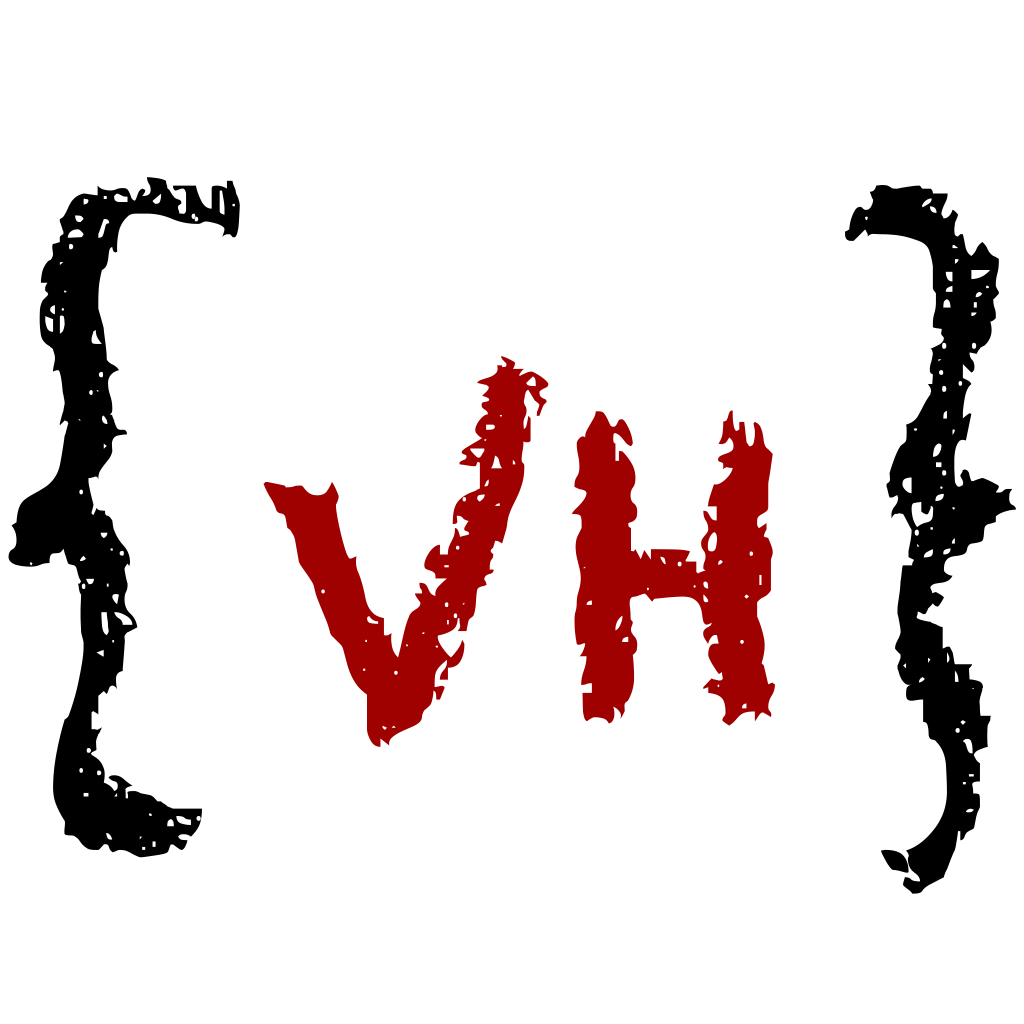
<style>
.page{position:relative;width:1024px;height:1024px;background:#ffffff}
.page>*{position:absolute;margin:0}
.t1{font:400px "Chalkduster";color:#9f0000}
.t2{font:549.2px "Chalkduster";color:#000000}
</style>
<div class="page">
<p class="t1" style="left:8px;top:177px;width:1008px;height:717px"><span class="t2">{</span>VH<span class="t2">}</span></p>
</div>
